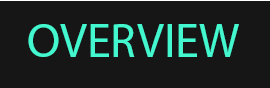
<style>
.page{position:relative;width:270px;height:88px;background:#161616}
.page>*{position:absolute;margin:0}
.t1{font:48px "MyriadPro-Regular";color:#43f7cf}
</style>
<div class="page">
<p class="t1" style="left:28px;top:24px;width:211px;height:33px">OVERVIEW</p>
</div>
